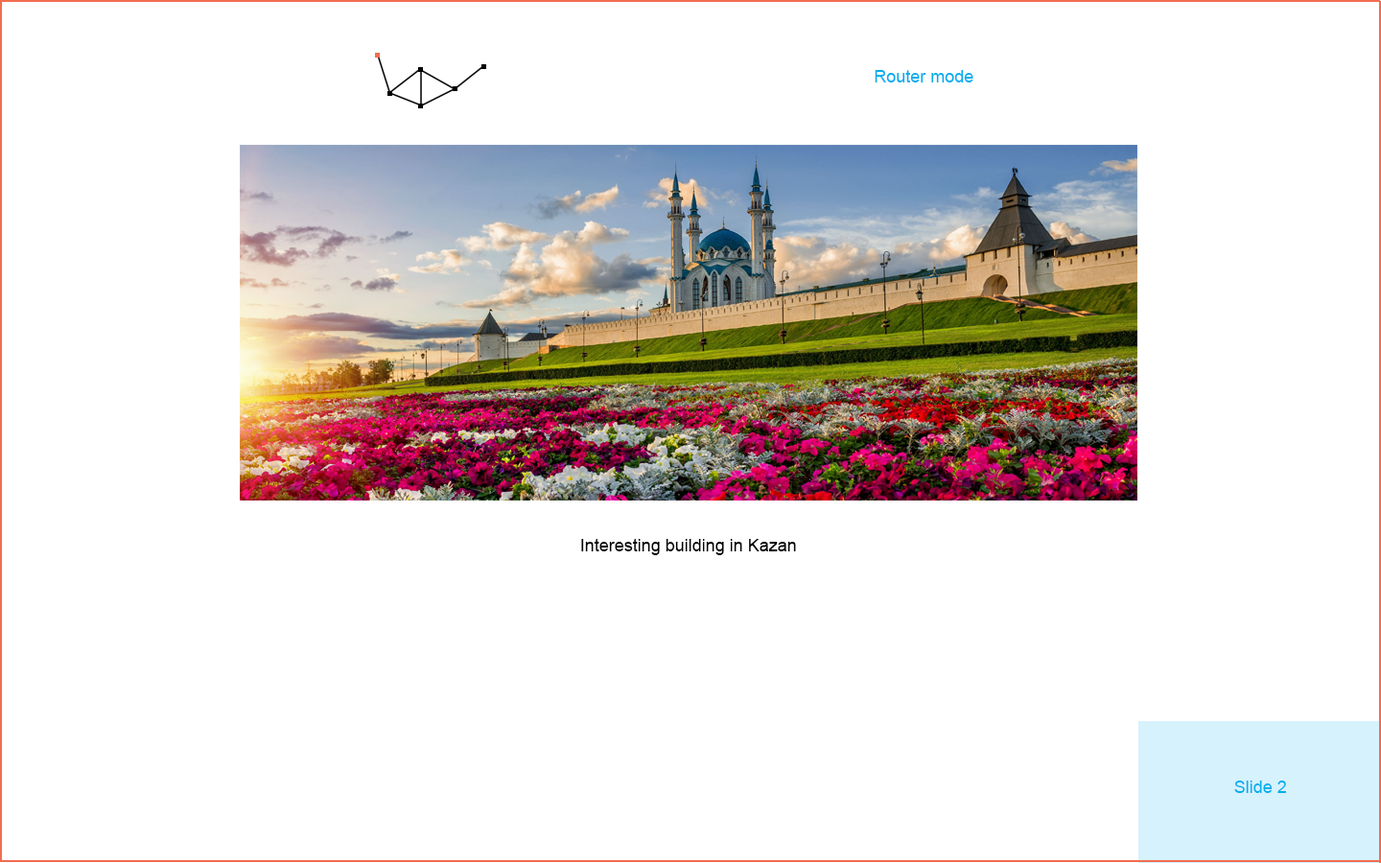
<style>
.page{position:relative;width:1381px;height:863px;background:#ffffff}
.page>*{position:absolute;margin:0}
.t1{font:17.3px "ArialMT";color:#00aeef}
.t2{font:17.3px "ArialMT";color:#000000}
</style>
<div class="page">
<p class="t1" style="left:875px;top:70px;width:99px;height:12px">Router mode</p>
<p class="t2" style="left:581px;top:539px;width:215px;height:16px">Interesting building in Kazan</p>
<p class="t1" style="left:1235px;top:781px;width:51px;height:12px">Slide 2</p>
</div>
